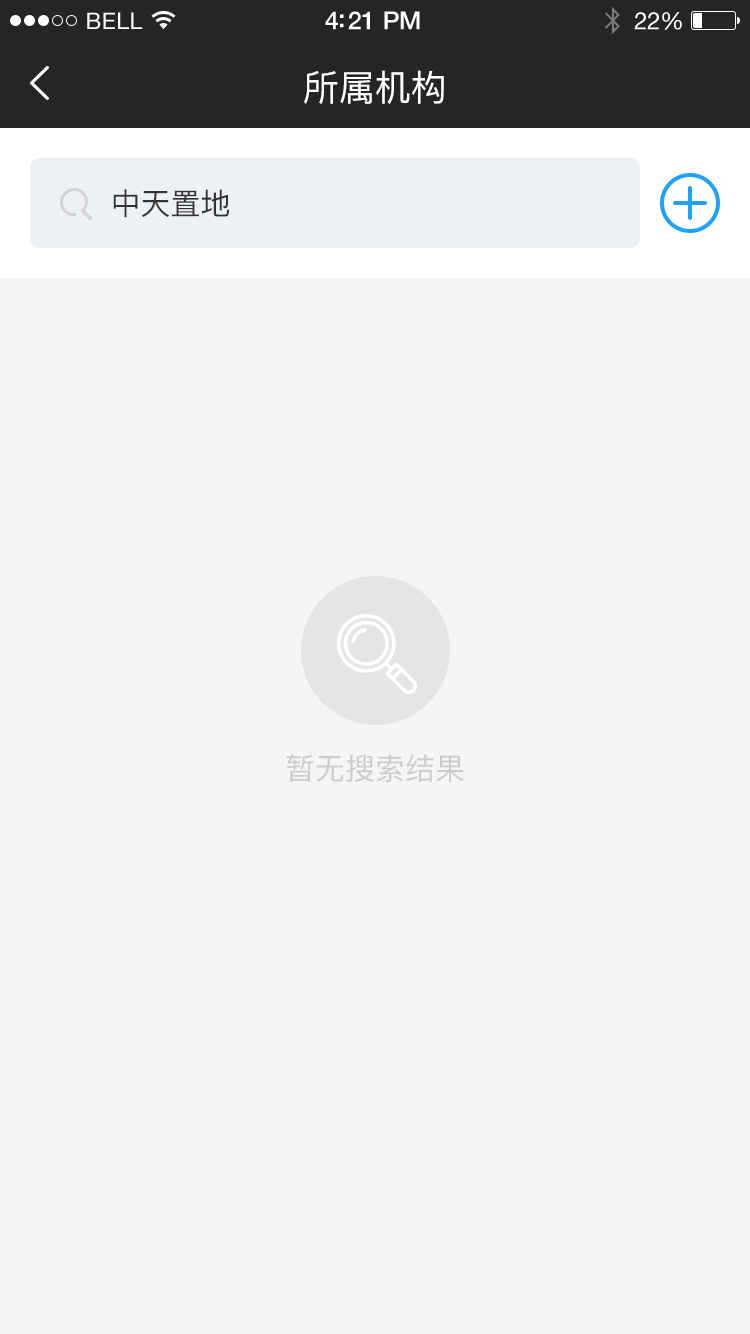
<style>
.page{position:relative;width:750px;height:1334px;background:#f5f5f5}
.page>*{position:absolute;margin:0}
.t1{font:23px "HelveticaNeue";letter-spacing:0.02em;color:#ffffff}
.t2{font:25px "HelveticaNeue-Medium";letter-spacing:-0.02em;color:#ffffff}
.t3{font:24px "HelveticaNeue";letter-spacing:-0.02em;color:#ffffff}
.t4{font:36px "PingFang-SC-Medium";color:#feffff}
.t5{font:30px "PingFang-SC-Medium";color:#333333}
.t6{font:30px "PingFang-SC-Medium";color:#cccccc}
</style>
<div class="page">
<p class="t1" style="left:87px;top:12px;width:56px;height:17px">BELL</p>
<p class="t2" style="left:325px;top:11px;width:95px;height:19px">4:21 PM</p>
<p class="t3" style="left:634px;top:12px;width:48px;height:18px">22%</p>
<p class="t4" style="left:304px;top:70px;width:140px;height:34px">所属机构</p>
<p class="t5" style="left:113px;top:189px;width:117px;height:29px">中天置地</p>
<p class="t6" style="left:286px;top:754px;width:178px;height:28px">暂无搜索结果</p>
</div>
